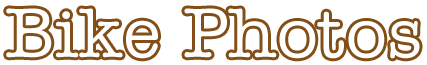
<style>
.page{position:relative;width:427px;height:65px;background:#ffffff}
.page>*{position:absolute;margin:0}
.t1{font:72px "AmerTypewriterITCbyBT-Medium";color:#ffffff}
</style>
<div class="page">
<p class="t1" style="left:6px;top:8px;width:414px;height:51px">Bike Photos</p>
</div>
